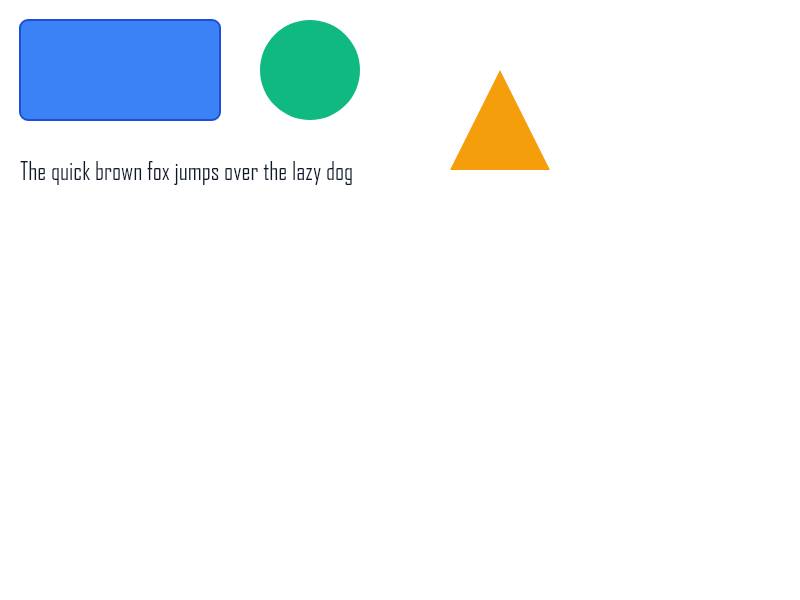
<style>
.page{position:relative;width:800px;height:600px;background:#ffffff}
.page>*{position:absolute;margin:0}
.t1{font:24px "ArialMT";color:#0f172a}
</style>
<div class="page">
<p class="t1" style="left:20px;top:160px;width:334px;height:30px">The quick brown fox jumps over the lazy dog</p>
</div>
